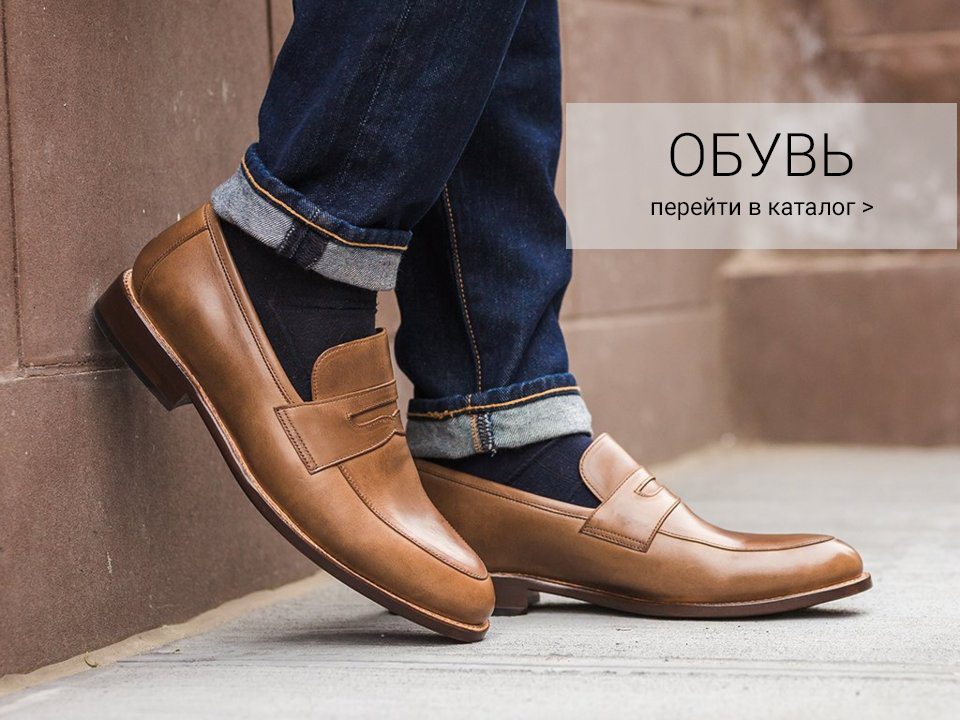
<style>
.page{position:relative;width:960px;height:720px}
.page>*{position:absolute;margin:0}
.t1{font:60px "Roboto-Light";color:#000000}
.t2{font:24px "Roboto-Regular";color:#000000}
</style>
<div class="page">
<p class="t1" style="left:670px;top:132px;width:183px;height:45px">ОБУВЬ</p>
<p class="t2" style="left:651px;top:197px;width:222px;height:23px">перейти в каталог &gt;</p>
</div>
